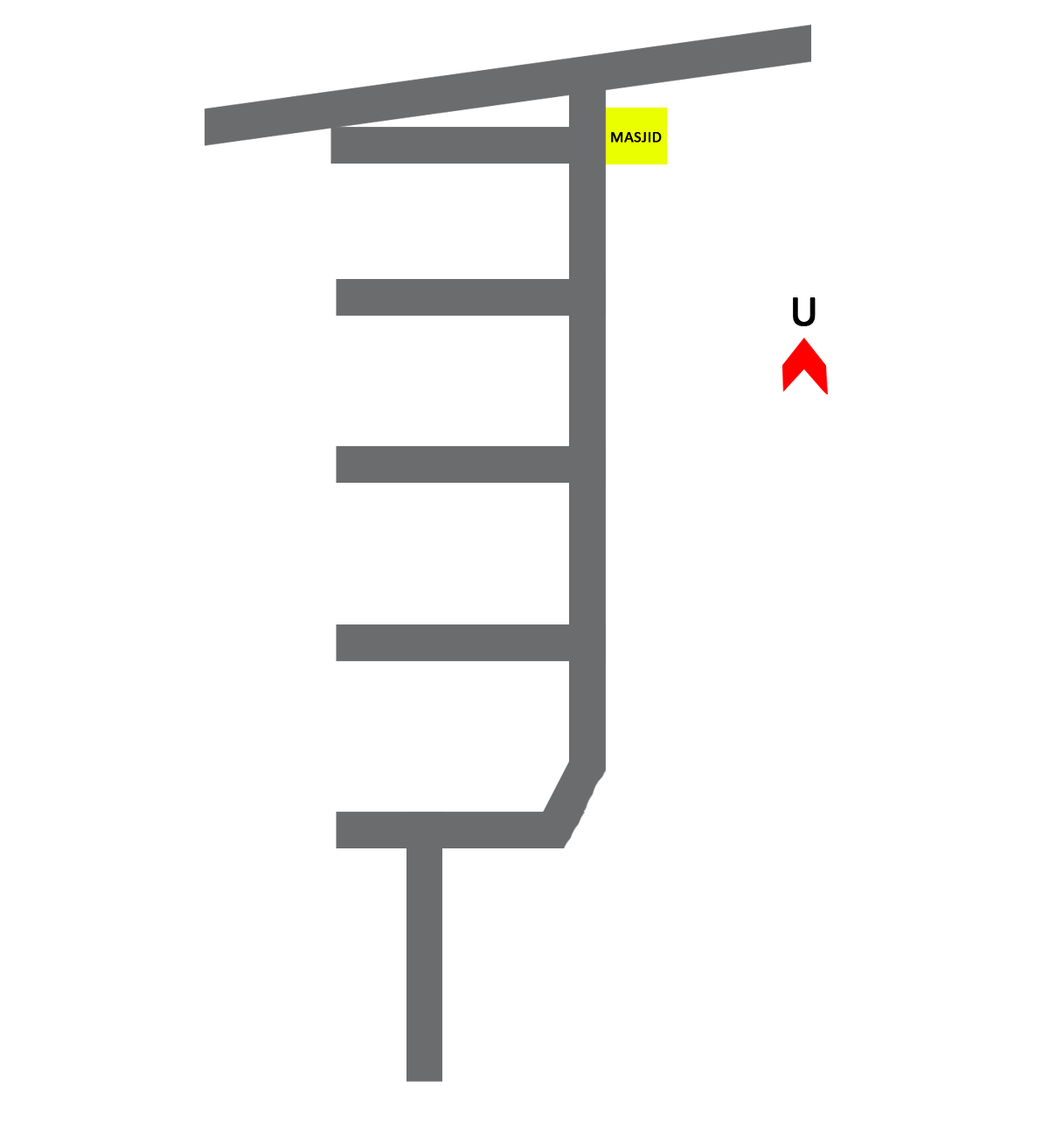
<style>
.page{position:relative;width:1049px;height:1137px;background:#ffffff}
.page>*{position:absolute;margin:0}
.t1{font:16.1px "Calibri";color:#000000;font-weight:bold}
.t2{font:44px "Calibri";color:#000000;font-weight:bold}
</style>
<div class="page">
<p class="t1" style="left:611px;top:132px;width:51px;height:11px">MASJID</p>
<p class="t2" style="left:793px;top:297px;width:23px;height:29px">U</p>
</div>
